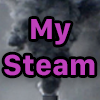
<style>
.page{position:relative;width:100px;height:100px}
.page>*{position:absolute;margin:0}
.t1{font:30px "SFCompactText-Bold";color:#bf40bb}
</style>
<div class="page">
<p class="t1" style="left:4px;top:19px;width:91px;height:57px;text-align:center">My<br>Steam</p>
</div>
